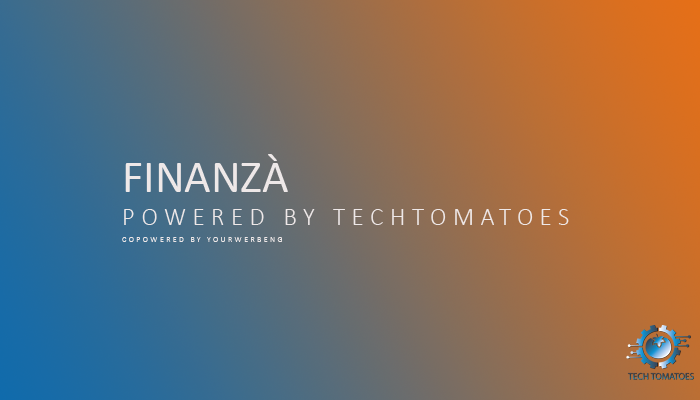
<style>
.page{position:relative;width:700px;height:400px}
.page>*{position:absolute;margin:0}
.t1{font:45.8px "Calibri";color:#eee8e8}
.t2{font:25px "Calibri-Light";letter-spacing:0.26em;color:#eee8e8;text-transform:uppercase}
.t3{font:8.4px "Calibri-Light";letter-spacing:0.26em;color:#eee8e8;text-transform:uppercase}
</style>
<div class="page">
<p class="t1" style="left:125px;top:154px;width:163px;height:38px">FINANZÀ</p>
<p class="t2" style="left:124px;top:209px;width:445px;height:16px">Powered By TechTomatoes</p>
<p class="t3" style="left:122px;top:237px;width:160px;height:5px">Copowered by yourwerbeng</p>
</div>
